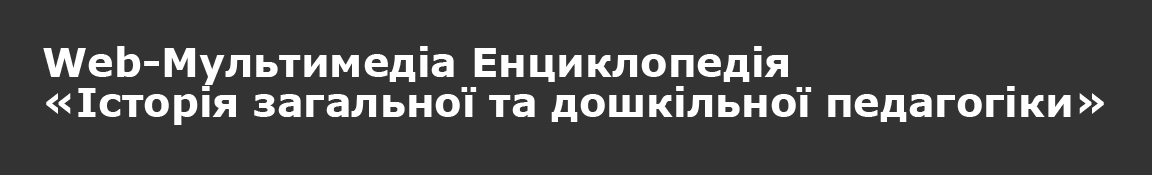
<style>
.page{position:relative;width:1152px;height:175px;background:#333333}
.page>*{position:absolute;margin:0}
.t1{font:40px/40px "Verdana-Bold";color:#ffffff}
</style>
<div class="page">
<p class="t1" style="left:43px;top:46px;width:1061px;height:79px">Web-Мультимедіа Енциклопедія <br>«Історія загальної та дошкільної педагогіки»</p>
</div>
